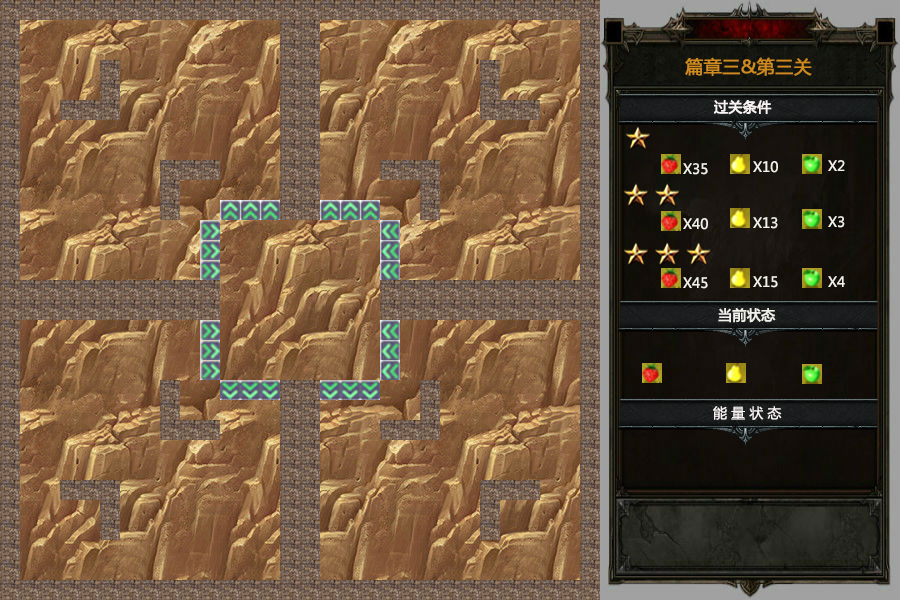
<style>
.page{position:relative;width:900px;height:600px}
.page>*{position:absolute;margin:0}
.t1{font:18px "MicrosoftYaHei";color:#cf8b20;font-weight:bold}
.t2{font:14px "MicrosoftYaHei";color:#f9f3f3;font-weight:bold}
.t3{font:14px "MicrosoftYaHei";color:#f1f0e9}
.t4{font:14px "MicrosoftYaHei";color:#f1f0e9;font-weight:bold}
.t5{font:14px "MicrosoftYaHei";color:#f9f3f3}
</style>
<div class="page">
<p class="t1" style="left:685px;top:57px;width:127px;height:19px">篇章三&amp;第三关</p>
<p class="t2" style="left:714px;top:100px;width:58px;height:15px">过关条件</p>
<p class="t3" style="left:753px;top:161px;width:25px;height:12px">X10</p>
<p class="t3" style="left:828px;top:160px;width:17px;height:11px">X2</p>
<p class="t3" style="left:683px;top:163px;width:25px;height:12px">X35</p>
<p class="t3" style="left:683px;top:218px;width:25px;height:12px">X40</p>
<p class="t3" style="left:753px;top:217px;width:25px;height:12px">X13</p>
<p class="t3" style="left:828px;top:216px;width:17px;height:12px">X3</p>
<p class="t3" style="left:683px;top:277px;width:25px;height:12px">X45</p>
<p class="t3" style="left:753px;top:276px;width:25px;height:12px">X15</p>
<p class="t3" style="left:828px;top:276px;width:17px;height:11px">X4</p>
<p class="t4" style="left:718px;top:308px;width:58px;height:15px">当前状态</p>
<p class="t5" style="left:713px;top:406px;width:69px;height:14px">能 量 状 态</p>
</div>
